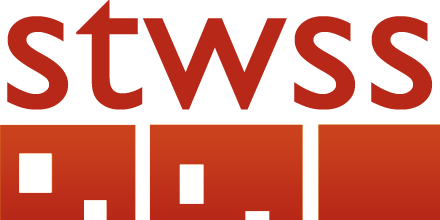
<style>
.page{position:relative;width:440px;height:220px;background:#ffffff}
.page>*{position:absolute;margin:0}
.t1{font:200px "GillSans";color:#b82818}
</style>
<div class="page">
<p class="t1" style="left:7px;top:0px;width:426px;height:110px">stwss</p>
</div>
